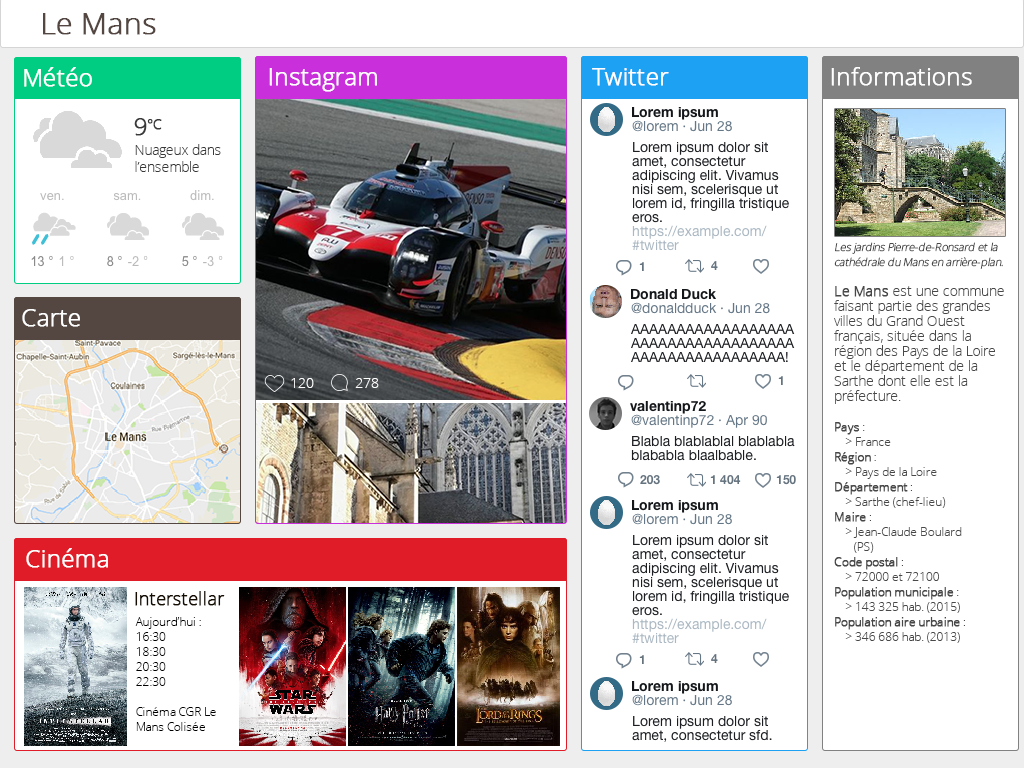
<style>
.page{position:relative;width:1024px;height:768px;background:#ffffff}
.page>*{position:absolute;margin:0}
.t1{font:30px "OpenSans-Light";letter-spacing:-0.014em;color:#544741;font-weight:bold}
.t2{font:24px "OpenSans-Light";letter-spacing:-0.014em;color:#ffffff;font-weight:bold}
.t3{font:14px/14px "HelveticaNeue";color:#1c1e22}
.t4{font:14px/14px "HelveticaNeue-Bold";color:#14171a}
.t5{font:14px/14px "HelveticaNeue";color:#657786}
.t6{font:14px/14px "HelveticaNeue";color:#abb8c2}
.t7{font:14px "OpenSans-Light";letter-spacing:-0.014em;color:#393939;text-transform:uppercase;font-weight:bold}
.t8{font:24px "OpenSans-Light";letter-spacing:-0.014em;color:#393939;text-transform:uppercase;font-weight:bold}
.t9{font:14px "OpenSans-Light";letter-spacing:-0.014em;color:#393939}
.t10{font:14px/15px "OpenSans-Light";letter-spacing:-0.014em;color:#484848}
.t11{font:11px/15px "OpenSans-Light";letter-spacing:-0.014em;color:#484848;font-style:italic}
.t12{font:14px/15px "OpenSans-Light";letter-spacing:-0.014em;color:#484848;font-weight:bold}
.t13{font:12px/15px "OpenSans-Light";letter-spacing:-0.014em;color:#484848;font-weight:bold}
.t14{font:12px/15px "OpenSans-Light";letter-spacing:-0.014em;color:#484848}
.t15{font:12px "HelveticaNeue-Bold";color:#65737f}
.t16{font:14px "OpenSans-Light";letter-spacing:-0.014em;color:#ffffff}
.t17{font:18px "OpenSans-Light";letter-spacing:-0.014em;color:#150d02;font-weight:bold}
.t18{font:12px/15px "OpenSans-Light";letter-spacing:-0.014em;color:#000000}
</style>
<div class="page">
<p class="t1" style="left:43px;top:13px;width:113px;height:22px">Le Mans</p>
<p class="t2" style="left:24px;top:67px;width:68px;height:20px">Météo</p>
<p class="t2" style="left:269px;top:68px;width:108px;height:24px">Instagram</p>
<p class="t2" style="left:592px;top:68px;width:77px;height:18px">Twitter</p>
<p class="t2" style="left:831px;top:67px;width:141px;height:19px">Informations</p>
<p class="t3" style="left:632px;top:107px;width:157px;height:144px"><span class="t4">Lorem ipsum<br></span><span class="t5">@lorem · Jun 28<br></span>Lorem ipsum dolor sit amet, consectetur adipiscing elit. Vivamus nisi sem, scelerisque ut lorem id, fringilla tristique eros.<br><span class="t6">https://example.com/ #twitter</span></p>
<p class="t7" style="left:134px;top:118px;width:28px;height:18px"><span class="t8">9</span>°C</p>
<p class="t9" style="left:135px;top:144px;width:86px;height:28px">Nuageux dans l’ensemble</p>
<p class="t10" style="left:834px;top:242px;width:170px;height:401px"><span class="t11">Les jardins Pierre-de-Ronsard et la cathédrale du Mans en arrière-plan.<br><br></span><span class="t12">Le Mans</span> est une commune faisant partie des grandes villes du Grand Ouest français, située dans la région des Pays de la Loire et le département de la Sarthe dont elle est la préfecture.<br><br><span class="t13">Pays </span><span class="t14">:<br>    &gt; France<br></span><span class="t13">Région</span><span class="t14"> :<br>    &gt; Pays de la Loire<br></span><span class="t13">Département</span><span class="t14"> :<br>    &gt; Sarthe (chef-lieu)<br></span><span class="t13">Maire</span><span class="t14"> :<br>    &gt; Jean-Claude Boulard<br>       (PS)<br></span><span class="t13">Code postal</span><span class="t14"> :<br>    &gt; 72000 et 72100<br></span><span class="t13">Population municipale</span><span class="t14"> :<br>    &gt; 143 325 hab. (2015)<br></span><span class="t13">Population aire urbaine</span><span class="t14"> :<br>    &gt; 346 686 hab. (2013)</span></p>
<p class="t15" style="left:639px;top:262px;width:5px;height:9px">1</p>
<p class="t15" style="left:711px;top:261px;width:7px;height:9px">4</p>
<p class="t3" style="left:631px;top:289px;width:164px;height:73px"><span class="t4">Donald Duck<br></span><span class="t5">@donaldduck · Jun 28<br></span>AAAAAAAAAAAAAAAAAAAAAAAAAAAAAAAAAAAAAAAAAAAAAAAAAAAAA!</p>
<p class="t2" style="left:22px;top:309px;width:58px;height:18px">Carte</p>
<p class="t15" style="left:778px;top:376px;width:5px;height:9px">1</p>
<p class="t16" style="left:291px;top:378px;width:23px;height:10px">120</p>
<p class="t16" style="left:355px;top:378px;width:24px;height:10px">278</p>
<p class="t3" style="left:630px;top:401px;width:165px;height:60px"><span class="t4">valentinp72<br></span><span class="t5">@valentinp72 · Apr 90<br></span>Blabla blablablal blablabla blababla blaalbable.</p>
<p class="t15" style="left:640px;top:475px;width:20px;height:10px">203</p>
<p class="t15" style="left:710px;top:475px;width:31px;height:10px">1 404</p>
<p class="t15" style="left:776px;top:475px;width:20px;height:10px">150</p>
<p class="t3" style="left:632px;top:500px;width:157px;height:144px"><span class="t4">Lorem ipsum<br></span><span class="t5">@lorem · Jun 28<br></span>Lorem ipsum dolor sit amet, consectetur adipiscing elit. Vivamus nisi sem, scelerisque ut lorem id, fringilla tristique eros.<br><span class="t6">https://example.com/ #twitter</span></p>
<p class="t2" style="left:26px;top:548px;width:82px;height:20px">Cinéma</p>
<p class="t17" style="left:135px;top:591px;width:90px;height:15px">Interstellar</p>
<p class="t18" style="left:135px;top:617px;width:81px;height:114px">Aujourd’hui :<br>16:30<br>18:30<br>20:30<br>22:30<br><br>Cinéma CGR Le Mans Colisée</p>
<p class="t15" style="left:711px;top:654px;width:7px;height:9px">4</p>
<p class="t15" style="left:639px;top:655px;width:5px;height:9px">1</p>
<p class="t3" style="left:632px;top:681px;width:140px;height:61px"><span class="t4">Lorem ipsum<br></span><span class="t5">@lorem · Jun 28<br></span>Lorem ipsum dolor sit amet, consectetur sfd.</p>
</div>
